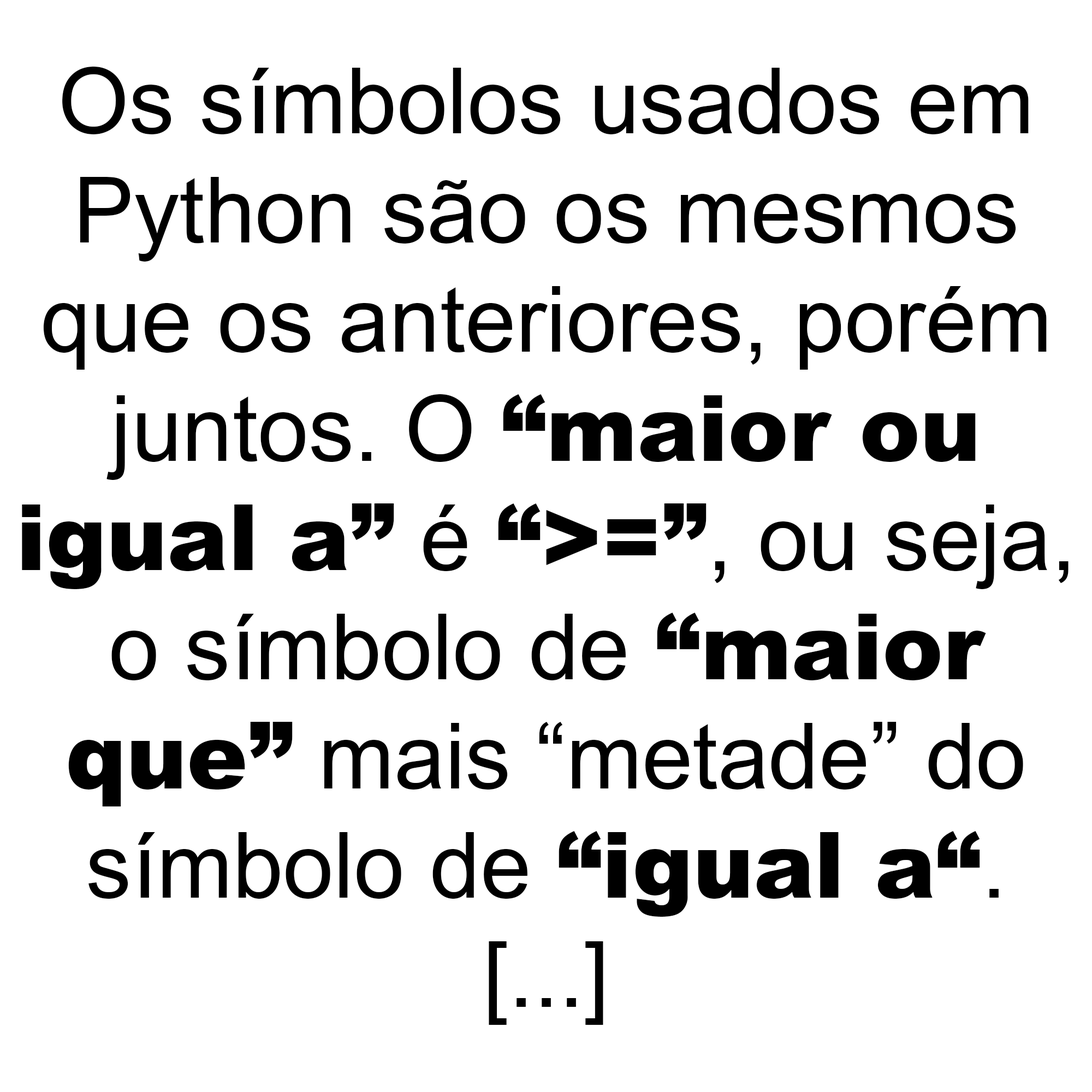
<style>
.page{position:relative;width:1092px;height:1092px;background:#ffffff}
.page>*{position:absolute;margin:0}
.t1{font:91px "ArialMT";color:#000000}
.t2{font:91px "Arial-Black";color:#000000}
</style>
<div class="page">
<p class="t1" style="left:22px;top:67px;width:1047px;height:958px;text-align:center">Os símbolos usados em<br>Python são os mesmos<br>que os anteriores, porém<br>juntos. O <span class="t2">“maior ou<br>igual a”</span> é <span class="t2">“&gt;=”</span>, ou seja,<br>o símbolo de <span class="t2">“maior<br>que”</span> mais “metade” do<br>símbolo de <span class="t2">“igual a“</span>.<br>[...]</p>
</div>
